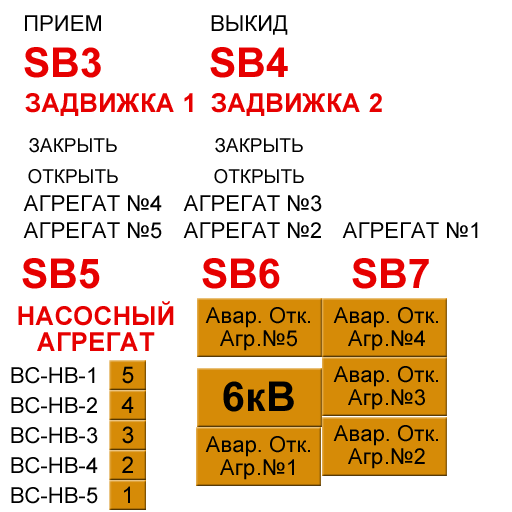
<style>
.page{position:relative;width:512px;height:512px;background:#ffffff}
.page>*{position:absolute;margin:0}
.t1{font:22.1px "ArialMT";color:#000000}
.t2{font:41.1px "Arial-BoldMT";color:#e60000}
.t3{font:26.1px "Arial-BoldMT";color:#e60000}
.t4{font:19px "ArialMT";color:#000000}
.t5{font:26.1px/26px "Arial-BoldMT";color:#e60000}
.t6{font:22.1px/23px "ArialMT";color:#000000}
.t7{font:23.1px "ArialMT";color:#000000}
.t8{font:41.1px "Arial-BoldMT";color:#000000}
</style>
<div class="page">
<p class="t1" style="left:25px;top:15px;width:76px;height:16px">ПРИЕМ</p>
<p class="t1" style="left:211px;top:15px;width:77px;height:20px">ВЫКИД</p>
<p class="t2" style="left:24px;top:47px;width:77px;height:31px">SB3</p>
<p class="t2" style="left:210px;top:47px;width:78px;height:31px">SB4</p>
<p class="t3" style="left:25px;top:93px;width:168px;height:23px">ЗАДВИЖКА 1</p>
<p class="t3" style="left:211px;top:93px;width:171px;height:23px">ЗАДВИЖКА 2</p>
<p class="t4" style="left:29px;top:138px;width:88px;height:15px">ЗАКРЫТЬ</p>
<p class="t4" style="left:215px;top:138px;width:88px;height:15px">ЗАКРЫТЬ</p>
<p class="t4" style="left:28px;top:169px;width:90px;height:15px">ОТКРЫТЬ</p>
<p class="t4" style="left:214px;top:169px;width:90px;height:15px">ОТКРЫТЬ</p>
<p class="t1" style="left:23px;top:195px;width:139px;height:16px">АГРЕГАТ №4</p>
<p class="t1" style="left:183px;top:195px;width:139px;height:17px">АГРЕГАТ №3</p>
<p class="t1" style="left:23px;top:222px;width:139px;height:17px">АГРЕГАТ №5</p>
<p class="t1" style="left:183px;top:222px;width:138px;height:16px">АГРЕГАТ №2</p>
<p class="t1" style="left:342px;top:222px;width:136px;height:16px">АГРЕГАТ №1</p>
<p class="t2" style="left:22px;top:258px;width:78px;height:31px">SB5</p>
<p class="t2" style="left:202px;top:258px;width:78px;height:31px">SB6</p>
<p class="t2" style="left:352px;top:258px;width:77px;height:31px">SB7</p>
<p class="t5" style="left:18px;top:301px;width:156px;height:50px;text-align:center">НАСОСНЫЙ<br>АГРЕГАТ</p>
<p class="t6" style="left:205px;top:307px;width:105px;height:44px;text-align:center">Авар. Отк.<br>Агр .№5</p>
<p class="t6" style="left:333px;top:307px;width:105px;height:44px;text-align:center">Авар. Отк.<br>Агр .№4</p>
<p class="t7" style="left:122px;top:366px;width:12px;height:18px">5</p>
<p class="t6" style="left:333px;top:366px;width:105px;height:44px;text-align:center">Авар. Отк.<br>Агр .№3</p>
<p class="t1" style="left:11px;top:367px;width:84px;height:17px">ВС-НВ-1</p>
<p class="t8" style="left:223px;top:381px;width:71px;height:31px">6кВ</p>
<p class="t1" style="left:11px;top:397px;width:86px;height:17px">ВС-НВ-2</p>
<p class="t7" style="left:121px;top:396px;width:13px;height:17px">4</p>
<p class="t6" style="left:333px;top:425px;width:105px;height:44px;text-align:center">Авар. Отк.<br>Агр .№2</p>
<p class="t1" style="left:11px;top:427px;width:87px;height:17px">ВС-НВ-3</p>
<p class="t7" style="left:122px;top:426px;width:12px;height:18px">3</p>
<p class="t6" style="left:205px;top:436px;width:105px;height:44px;text-align:center">Авар. Отк.<br>Агр .№1</p>
<p class="t1" style="left:11px;top:457px;width:87px;height:17px">ВС-НВ-4</p>
<p class="t7" style="left:122px;top:456px;width:11px;height:17px">2</p>
<p class="t7" style="left:124px;top:486px;width:6px;height:17px">1</p>
<p class="t1" style="left:11px;top:487px;width:87px;height:17px">ВС-НВ-5</p>
</div>
